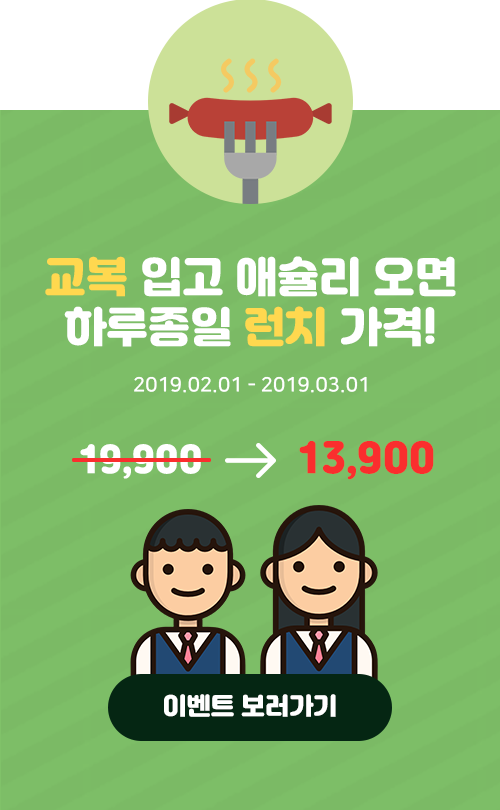
<style>
.page{position:relative;width:500px;height:810px;background:#7dbe67}
.page>*{position:absolute;margin:0}
.t1{font:42px "Jalnan";color:#ffffff}
.t2{font:42px "Jalnan";color:#ffd84f}
.t3{font:20px "NanumSquare_acB";color:#ffffff}
.t4{font:36px "Jalnan";color:#ffffff}
.t5{font:40px "Jalnan";color:#fa2e2e}
.t6{font:24px "Jalnan";color:#ffffff}
</style>
<div class="page">
<p class="t1" style="left:45px;top:256px;width:411px;height:91px;text-align:center"><span class="t2">교복</span> 입고 애슐리 오면<br>하루종일 <span class="t2">런치</span> 가격!</p>
<p class="t3" style="left:134px;top:376px;width:233px;height:17px">2019.02.01 - 2019.03.01</p>
<p class="t4" style="left:80px;top:444px;width:121px;height:35px">19,900</p>
<p class="t5" style="left:299px;top:440px;width:135px;height:40px">13,900</p>
<p class="t6" style="left:164px;top:694px;width:172px;height:23px">이벤트 보러가기</p>
</div>
